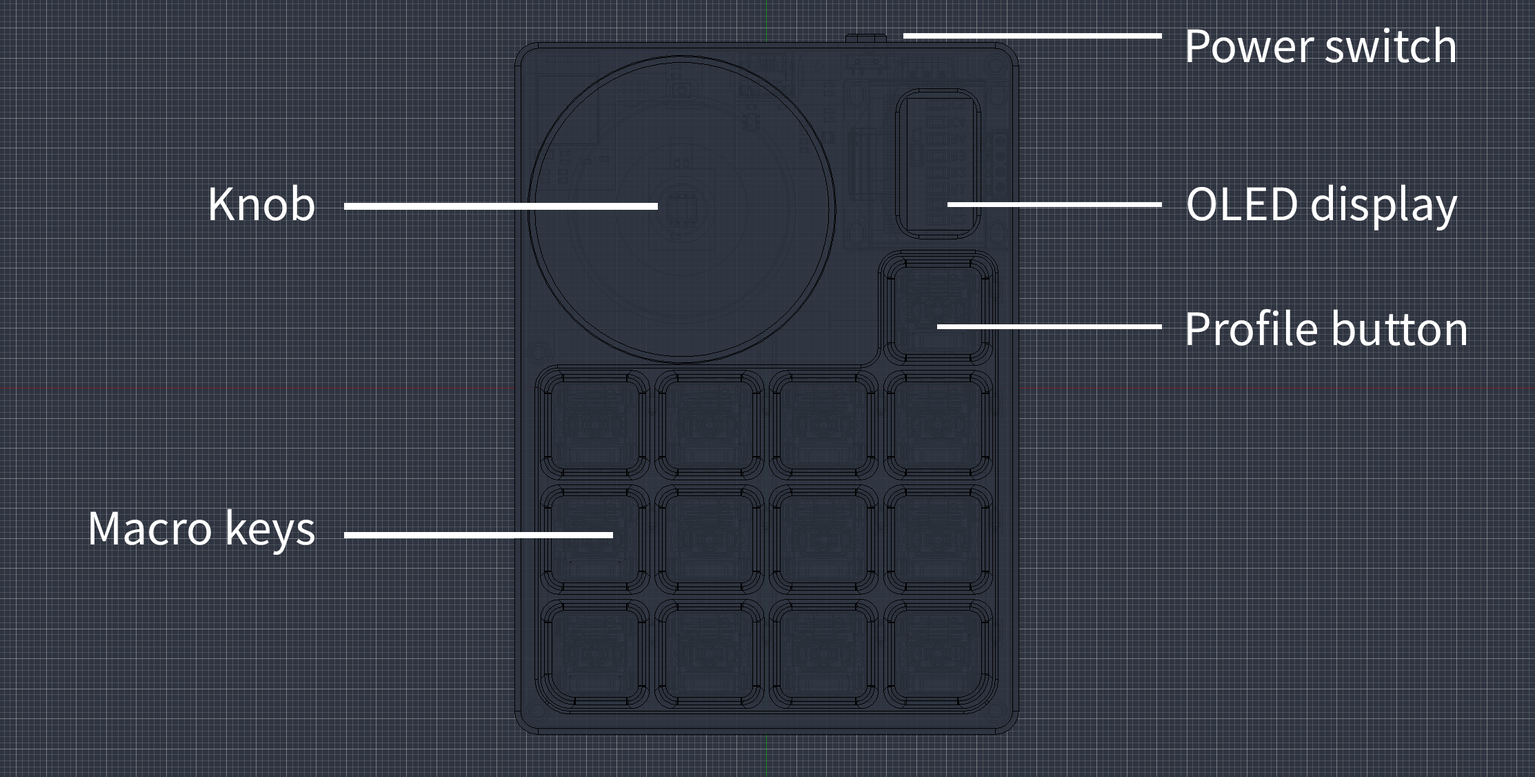
<style>
.page{position:relative;width:1535px;height:777px}
.page>*{position:absolute;margin:0}
.t1{font:49.7px "SourceSansPro-Regular";color:#ffffff}
</style>
<div class="page">
<p class="t1" style="left:1188px;top:26px;width:267px;height:37px">Power switch</p>
<p class="t1" style="left:210px;top:184px;width:105px;height:37px">Knob</p>
<p class="t1" style="left:1188px;top:184px;width:270px;height:46px">OLED display</p>
<p class="t1" style="left:1188px;top:308px;width:278px;height:38px">Profile button</p>
<p class="t1" style="left:90px;top:508px;width:225px;height:47px">Macro keys</p>
</div>
